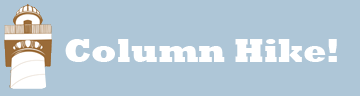
<style>
.page{position:relative;width:360px;height:96px;background:#aec6d7}
.page>*{position:absolute;margin:0}
.t1{font:34px "Rockwell-ExtraBold";color:#ffffff}
</style>
<div class="page">
<p class="t1" style="left:65px;top:39px;width:272px;height:23px">Column Hike!</p>
</div>
